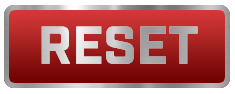
<style>
.page{position:relative;width:235px;height:94px}
.page>*{position:absolute;margin:0}
.t1{font:53px "Industry-Bold"}
</style>
<div class="page">
<p class="t1" style="left:41px;top:26px;width:157px;height:38px">RESET</p>
</div>
